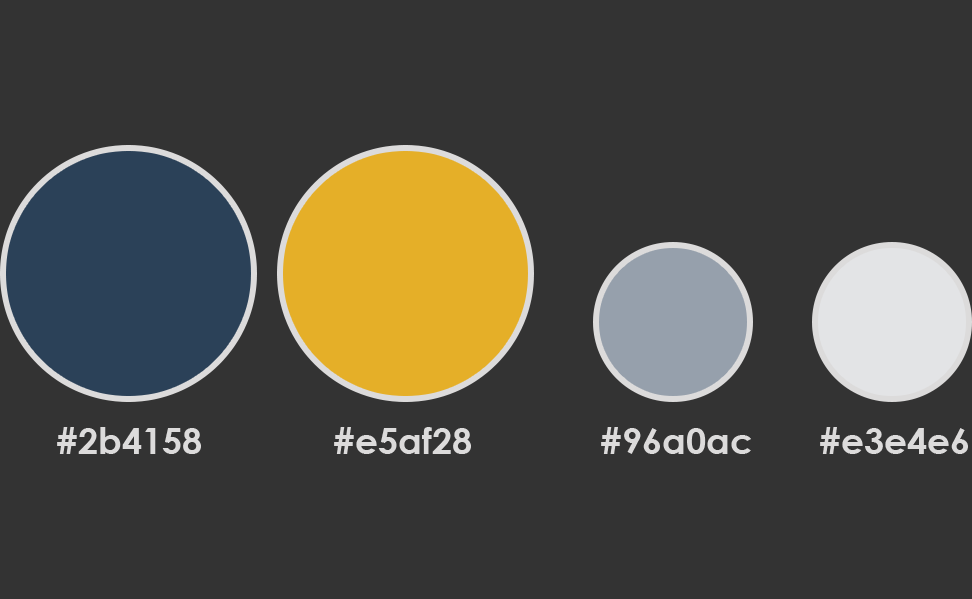
<style>
.page{position:relative;width:972px;height:599px;background:#333333}
.page>*{position:absolute;margin:0}
.t1{font:35.9px "CenturyGothic-Bold";color:#dcdbdb}
</style>
<div class="page">
<p class="t1" style="left:57px;top:427px;width:144px;height:27px">#2b4158</p>
<p class="t1" style="left:334px;top:427px;width:137px;height:27px">#e5af28</p>
<p class="t1" style="left:601px;top:427px;width:150px;height:27px">#96a0ac</p>
<p class="t1" style="left:820px;top:427px;width:148px;height:27px">#e3e4e6</p>
</div>
